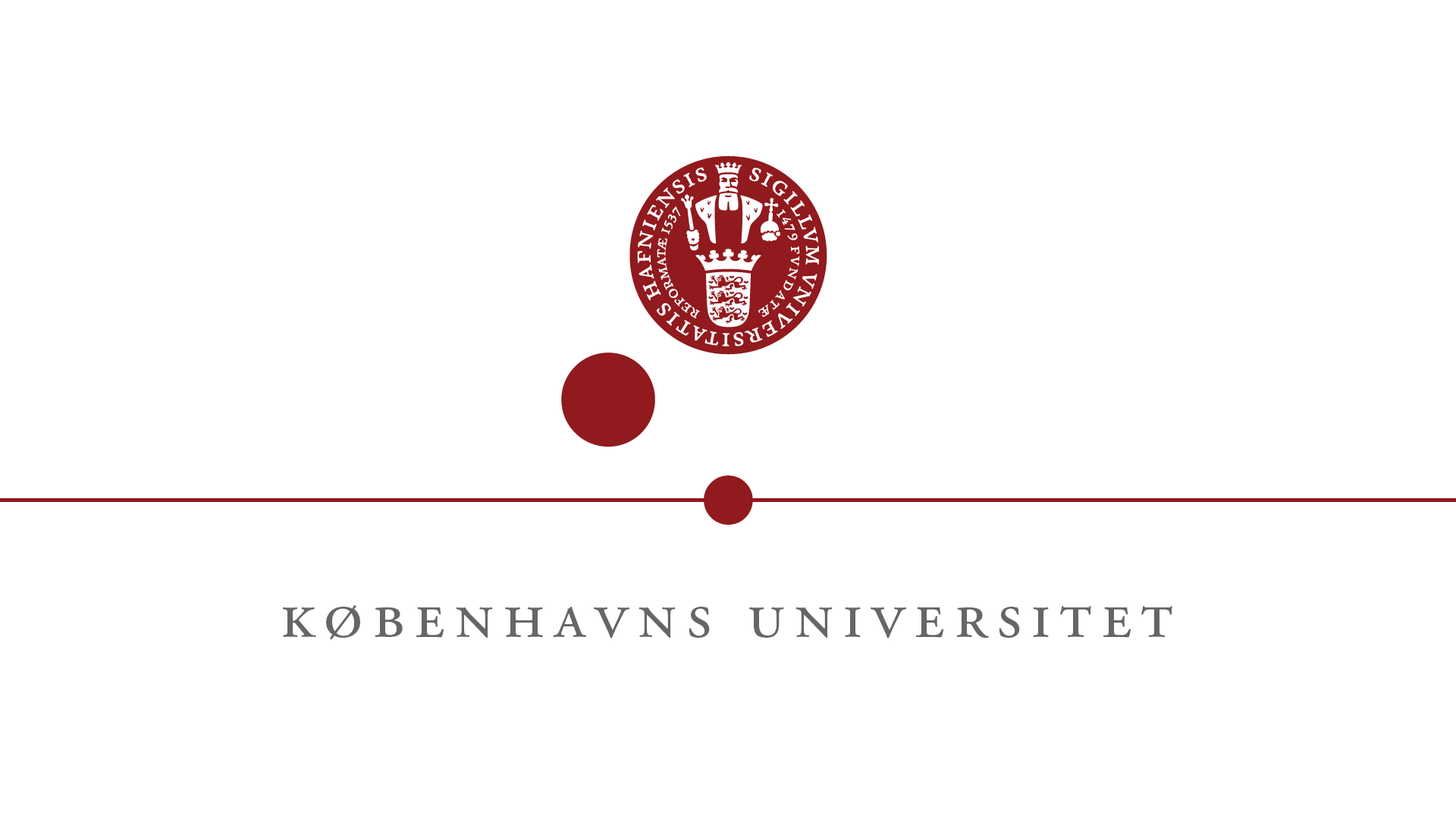
<style>
.page{position:relative;width:1456px;height:819px;background:#ffffff}
.page>*{position:absolute;margin:0}
.t1{font:69px "AGaramondPro-Regular";letter-spacing:0.13em;color:#666666;font-variant:small-caps}
</style>
<div class="page">
<p class="t1" style="left:283px;top:605px;width:889px;height:35px">københavns universitet</p>
</div>
